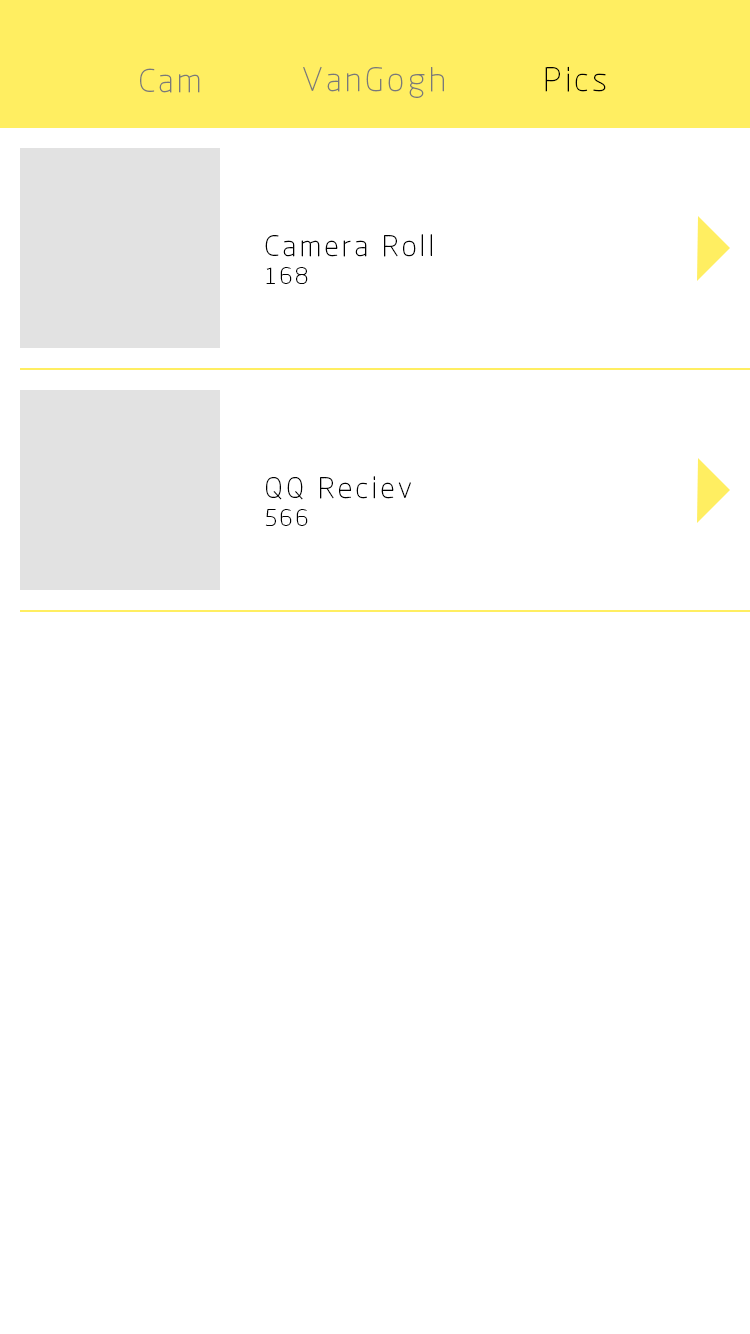
<style>
.page{position:relative;width:750px;height:1334px;background:#ffffff}
.page>*{position:absolute;margin:0}
.t1{font:34px "RTWSYueGoTrial-ExLight";letter-spacing:0.1em;color:#797979}
.t2{font:34px "RTWSYueGoTrial-ExLight";letter-spacing:0.1em;color:#000000}
.t3{font:30px "RTWSYueGoTrial-ExLight";letter-spacing:0.1em;color:#000000}
.t4{font:24px "RTWSYueGoTrial-ExLight";letter-spacing:0.1em;color:#010101}
</style>
<div class="page">
<p class="t1" style="left:140px;top:68px;width:60px;height:25px">Cam</p>
<p class="t1" style="left:303px;top:66px;width:141px;height:32px">VanGogh</p>
<p class="t2" style="left:545px;top:66px;width:61px;height:26px">Pics</p>
<p class="t3" style="left:265px;top:234px;width:167px;height:23px">Camera Roll</p>
<p class="t4" style="left:266px;top:267px;width:42px;height:17px">168</p>
<p class="t3" style="left:266px;top:476px;width:145px;height:24px">QQ Reciev</p>
<p class="t4" style="left:265px;top:509px;width:43px;height:17px">566</p>
</div>
